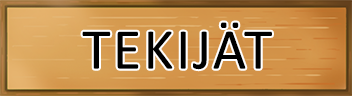
<style>
.page{position:relative;width:352px;height:96px}
.page>*{position:absolute;margin:0}
.t1{font:58px "Calibri";letter-spacing:0.04em;color:#000000}
</style>
<div class="page">
<p class="t1" style="left:82px;top:22px;width:190px;height:48px">TEKIJÄT</p>
</div>
